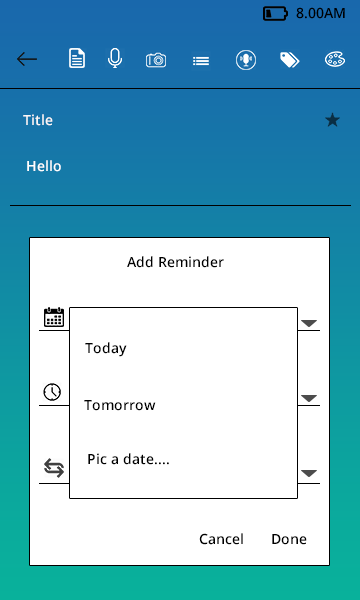
<style>
.page{position:relative;width:360px;height:600px;background:#ffffff}
.page>*{position:absolute;margin:0}
.t1{font:14px "OpenSans-Semibold";color:#000000}
.t2{font:14px "OpenSans-Semibold";color:#fbf8f8}
.t3{font:14px "OpenSans-Semibold";color:#ffffff}
</style>
<div class="page">
<p class="t1" style="left:296px;top:7px;width:49px;height:12px">8.00AM</p>
<p class="t2" style="left:23px;top:114px;width:30px;height:12px">Title</p>
<p class="t3" style="left:27px;top:160px;width:34px;height:12px">Hello</p>
<p class="t1" style="left:127px;top:256px;width:97px;height:12px">Add Reminder</p>
<p class="t1" style="left:85px;top:342px;width:42px;height:15px">Today</p>
<p class="t1" style="left:84px;top:400px;width:72px;height:11px">Tomorrow</p>
<p class="t1" style="left:88px;top:453px;width:81px;height:12px">Pic a date....</p>
<p class="t1" style="left:199px;top:533px;width:44px;height:12px">Cancel</p>
<p class="t1" style="left:272px;top:534px;width:35px;height:11px">Done</p>
</div>
